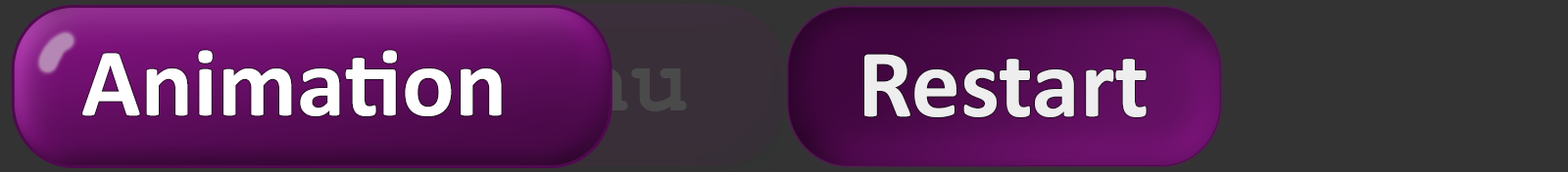
<style>
.page{position:relative;width:1568px;height:172px;background:#333333}
.page>*{position:absolute;margin:0}
.t1{font:98px "Calibri-Bold";color:#ffffff}
.t2{font:98px "Calibri-Bold";color:#eeeeee}
</style>
<div class="page">
<p class="t1" style="left:82px;top:50px;width:420px;height:67px">Animation</p>
<p class="t2" style="left:864px;top:54px;width:283px;height:64px">Restart</p>
</div>
